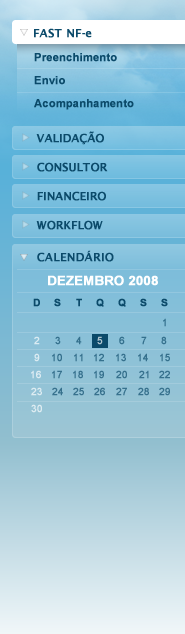
<style>
.page{position:relative;width:185px;height:634px}
.page>*{position:absolute;margin:0}
.t1{font:11px "LucidaSans-Demi";color:#0b4a6a}
.t2{font:11px "Arial-BoldMT";color:#0b4a6a}
.t3{font:11px "LucidaSans-Demi";letter-spacing:-0.27em;color:#0b4a6a}
.t4{font:13px "Arial-BoldMT";color:#ffffff}
.t5{font:10px "ArialMT";color:#33708d}
</style>
<div class="page">
<p class="t1" style="left:34px;top:28px;width:58px;height:10px">FAST NF-e</p>
<p class="t2" style="left:34px;top:53px;width:83px;height:9px">Preenchimento</p>
<p class="t2" style="left:34px;top:76px;width:31px;height:9px">Envio</p>
<p class="t2" style="left:34px;top:99px;width:100px;height:11px">Acompanhamento</p>
<p class="t3" style="left:36px;top:131px;width:68px;height:14px">VALIDAÇÃO</p>
<p class="t3" style="left:37px;top:162px;width:71px;height:10px">CONSULTOR</p>
<p class="t3" style="left:37px;top:191px;width:69px;height:10px">FINANCEIRO</p>
<p class="t3" style="left:36px;top:220px;width:67px;height:10px">WORKFLOW</p>
<p class="t1" style="left:37px;top:250px;width:77px;height:12px">CALENDÁRIO</p>
<p class="t4" style="left:48px;top:275px;width:110px;height:11px">DEZEMBRO 2008</p>
<p class="t5" style="left:163px;top:318px;width:3px;height:9px">1</p>
</div>
